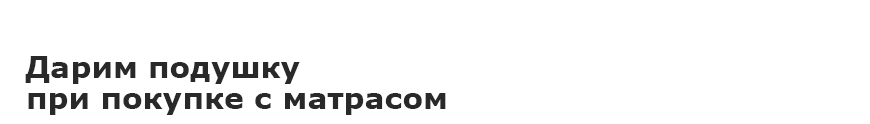
<style>
.page{position:relative;width:870px;height:124px;background:#ffffff}
.page>*{position:absolute;margin:0}
.t1{font:30px "Verdana-Bold";color:#292929}
</style>
<div class="page">
<p class="t1" style="left:25px;top:56px;width:275px;height:28px">Дарим подушку</p>
<p class="t1" style="left:28px;top:93px;width:418px;height:22px">при покупке с матрасом</p>
</div>
